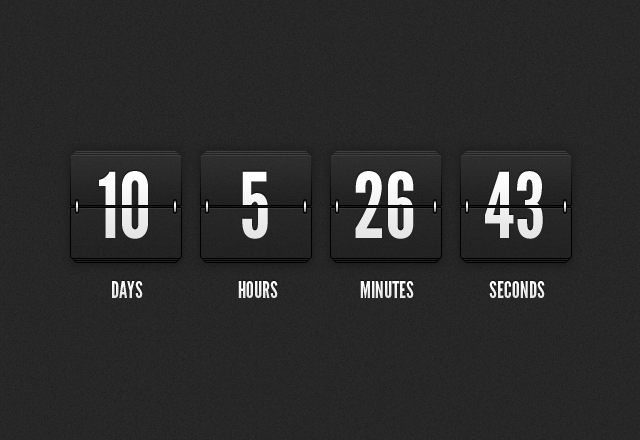
<style>
.page{position:relative;width:640px;height:440px}
.page>*{position:absolute;margin:0}
.t1{font:90.2px "LeagueGothic";color:#ffffff}
.t2{font:22.4px "LeagueGothic";color:#ffffff;text-transform:uppercase}
</style>
<div class="page">
<p class="t1" style="left:99px;top:171px;width:49px;height:68px">10</p>
<p class="t1" style="left:242px;top:171px;width:26px;height:68px">5</p>
<p class="t1" style="left:355px;top:171px;width:59px;height:68px">26</p>
<p class="t1" style="left:485px;top:171px;width:58px;height:68px">43</p>
<p class="t2" style="left:112px;top:281px;width:31px;height:17px">Days</p>
<p class="t2" style="left:238px;top:281px;width:40px;height:17px">Hours</p>
<p class="t2" style="left:360px;top:281px;width:54px;height:17px">Minutes</p>
<p class="t2" style="left:489px;top:281px;width:56px;height:17px">Seconds</p>
</div>
